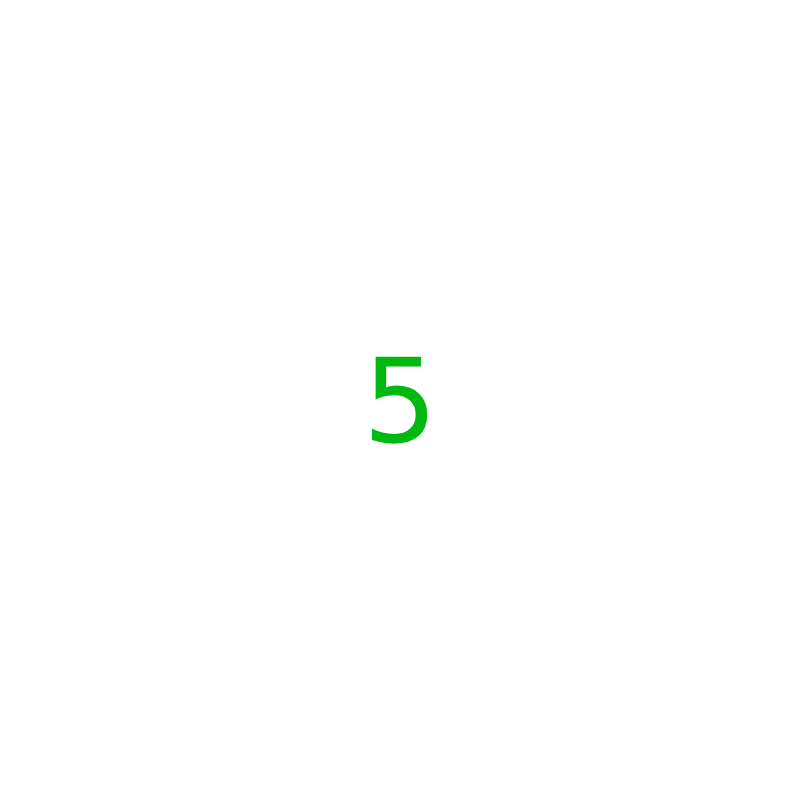
<style>
.page{position:relative;width:800px;height:800px;background:#ffffff}
.page>*{position:absolute;margin:0}
.t1{font:117px "DejaVuSans";color:#00b910}
</style>
<div class="page">
<p class="t1" style="left:372px;top:356px;width:56px;height:88px">5</p>
</div>
